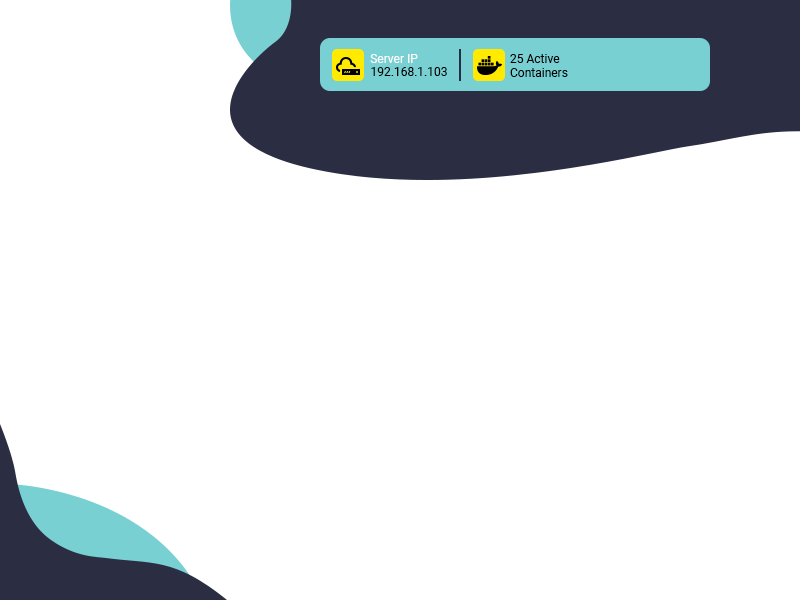
<style>
.page{position:relative;width:800px;height:600px;background:#ffffff}
.page>*{position:absolute;margin:0}
.t1{font:12px "Roboto-Regular";color:#ffffff}
.t2{font:12px "Roboto-Regular";color:#000000}
</style>
<div class="page">
<p class="t1" style="left:370px;top:54px;width:48px;height:9px">Server IP</p>
<p class="t2" style="left:510px;top:54px;width:58px;height:23px">25 Active<br>Containers</p>
<p class="t2" style="left:371px;top:67px;width:76px;height:9px">192.168.1.103</p>
</div>
